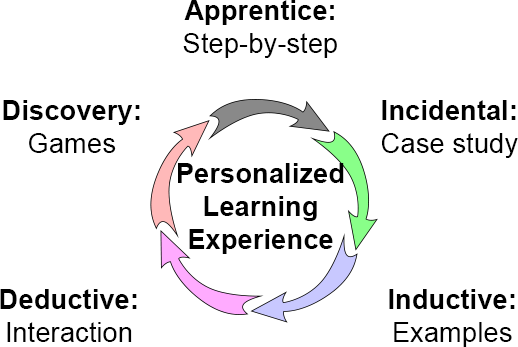
<style>
.page{position:relative;width:518px;height:347px;background:#ffffff}
.page>*{position:absolute;margin:0}
.t1{font:27.5px "ArialMT";color:#000000}
.t2{font:27.5px "Arial-BoldMT";color:#000000}
</style>
<div class="page">
<p class="t1" style="left:183px;top:0px;width:154px;height:58px;text-align:center"><span class="t2">Apprentice:<br></span>Step-by-step</p>
<p class="t2" style="left:3px;top:100px;width:137px;height:53px;text-align:center">Discovery:<br><span class="t1">Games</span></p>
<p class="t2" style="left:382px;top:100px;width:136px;height:58px;text-align:center">Incidental:<br><span class="t1">Case study</span></p>
<p class="t2" style="left:178px;top:163px;width:166px;height:91px;text-align:center">Personalized<br>Learning<br>Experience</p>
<p class="t1" style="left:0px;top:289px;width:137px;height:53px;text-align:center"><span class="t2">Deductive:<br></span>Interaction</p>
<p class="t2" style="left:389px;top:289px;width:126px;height:58px;text-align:center">Inductive:<br><span class="t1">Examples</span></p>
</div>
